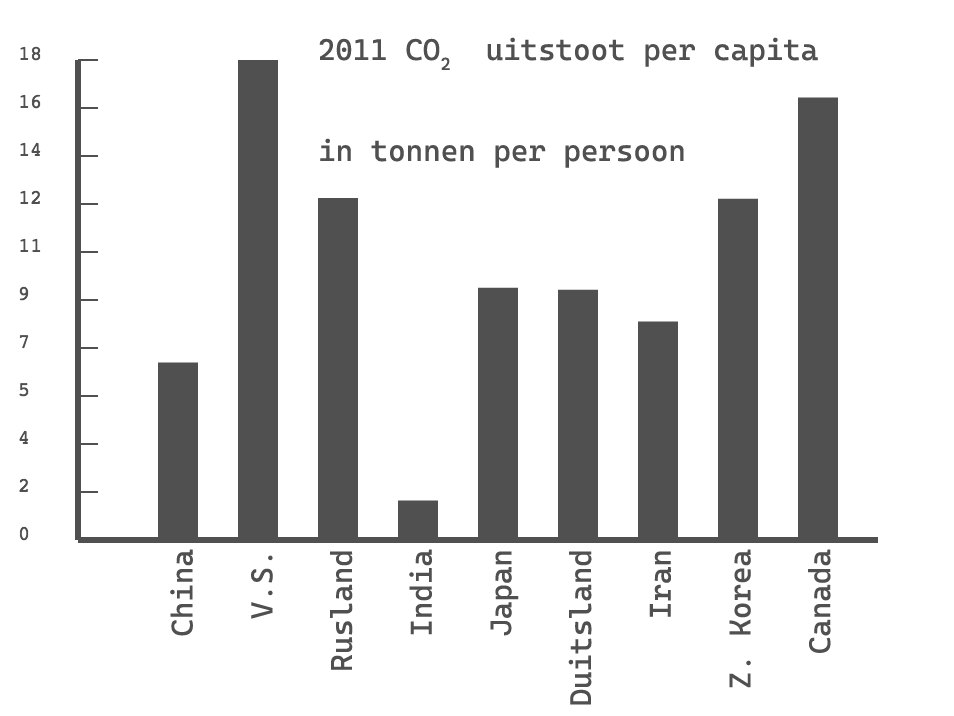
<style>
.page{position:relative;width:954px;height:716px;background:#ffffff}
.page>*{position:absolute;margin:0}
.t1{font:29.9px "CascadiaCode";color:#505050}
.t2{font:29.9px/79.7px "CascadiaCode";color:#505050}
</style>
<div class="page">
<p class="t1" style="left:319px;top:37px;width:499px;height:33px">2011 CO2  uitstoot per capita</p>
<p class="t1" style="left:320px;top:138px;width:364px;height:30px">in tonnen per persoon</p>
<p class="t2" style="left:170px;top:549px;width:661px;height:156px;text-align:right;rotate:-90deg">China<br>V.S.<br>Rusland<br>India<br>Japan<br>Duitsland<br>Iran<br>Z. Korea<br>Canada</p>
</div>
